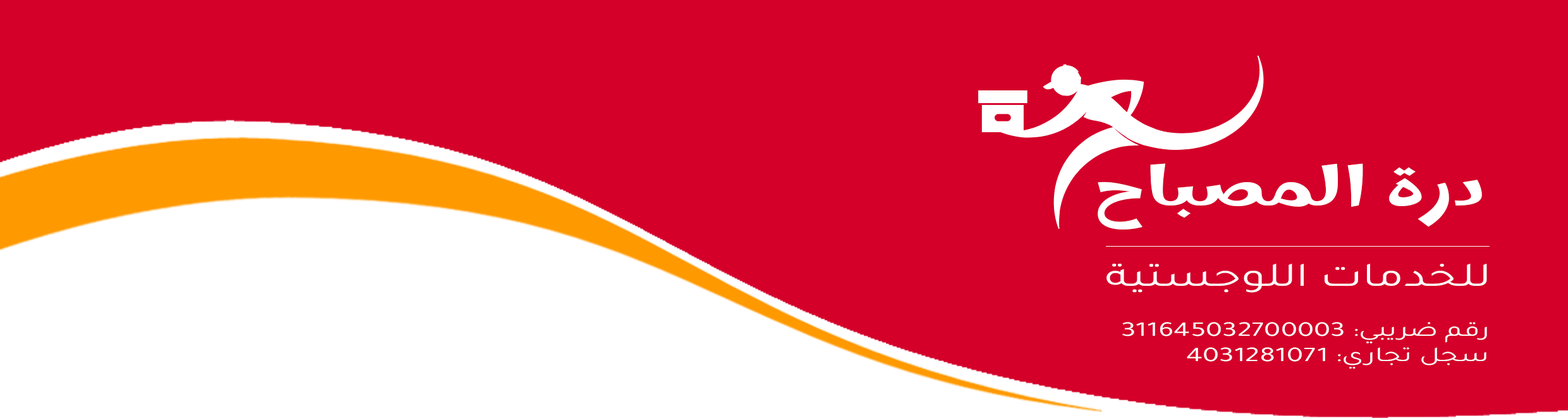
<style>
.page{position:relative;width:1568px;height:418px;background:#d40029}
.page>*{position:absolute;margin:0}
.t1{font:57px "Marhey-Medium";color:#ffffff;scale:1.42 1}
.t2{font:34.2px "Tajawal-Regular";color:#ffffff;scale:1.42 1}
.t3{font:21.1px "Tajawal-Regular";color:#ffffff;scale:1.42 1}
</style>
<div class="page">
<p class="t1" style="left:1098px;top:163px;width:384px;height:67px">درة المصباح</p>
<p class="t2" style="left:1106px;top:264px;width:381px;height:29px">للخدمات اللوجستية</p>
<p class="t3" style="left:1122px;top:322px;width:365px;height:47px">رقم ضريبي: 311645032700003<br>سجل تجاري: 4031281071</p>
</div>
